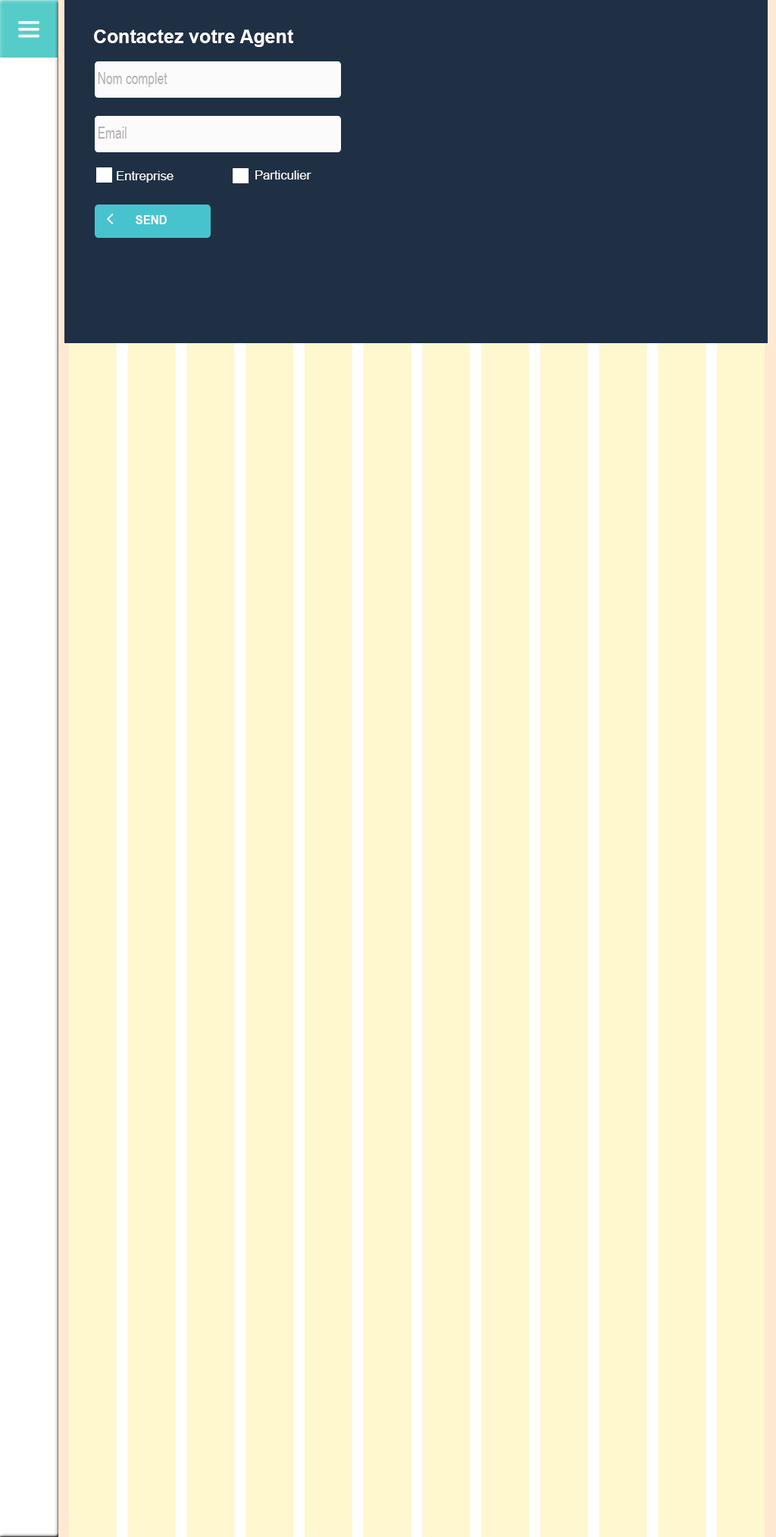
<style>
.page{position:relative;width:776px;height:1537px;background:#fff7ce}
.page>*{position:absolute;margin:0}
.t1{font:18.9px "Arial-BoldMT";color:#ffffff}
.t2{font:16.7px "ArialNarrow";color:#b8b1b1;scale:0.86 1}
.t3{font:12.6px "ArialMT";color:#fffefe}
.t4{font:12.6px "Arial-BoldMT";color:#ffffff;scale:0.91 1}
</style>
<div class="page">
<p class="t1" style="left:94px;top:30px;width:199px;height:17px">Contactez votre Agent</p>
<p class="t2" style="left:98px;top:72px;width:69px;height:15px">Nom complet</p>
<p class="t2" style="left:98px;top:127px;width:29px;height:12px">Email</p>
<p class="t3" style="left:117px;top:171px;width:56px;height:12px">Entreprise</p>
<p class="t3" style="left:255px;top:170px;width:56px;height:10px">Particulier</p>
<p class="t4" style="left:136px;top:215px;width:31px;height:9px">SEND</p>
</div>
